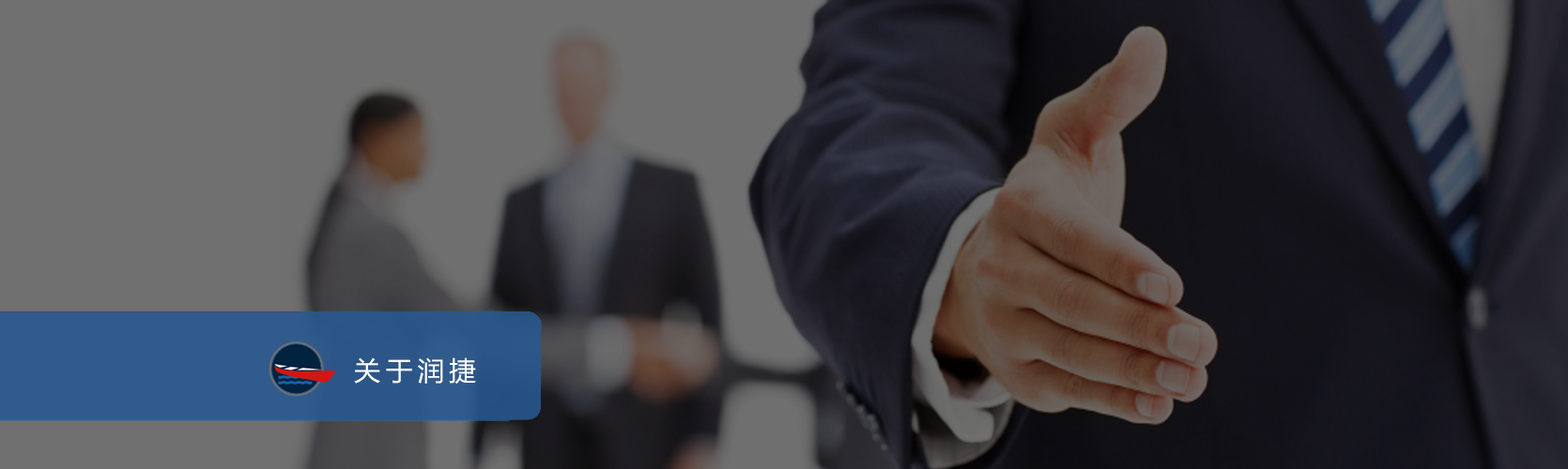
<style>
.page{position:relative;width:1568px;height:469px}
.page>*{position:absolute;margin:0}
.t1{font:26.3px "MicrosoftYaHei";letter-spacing:0.2em;color:#ffffff}
</style>
<div class="page">
<p class="t1" style="left:354px;top:358px;width:122px;height:26px">关于润捷</p>
</div>
